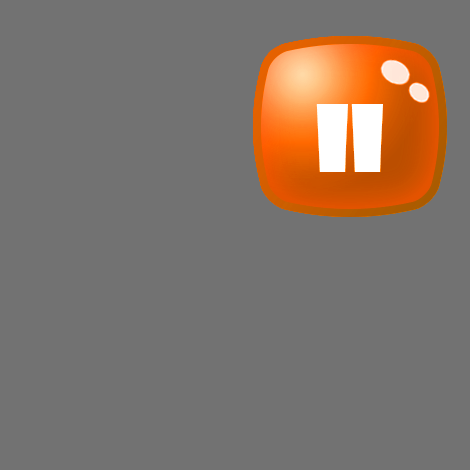
<style>
.page{position:relative;width:470px;height:470px;background:#727272}
.page>*{position:absolute;margin:0}
.t1{font:90.3px "ShowcardGothic-Reg";color:#ffffff}
</style>
<div class="page">
<p class="t1" style="left:316px;top:104px;width:32px;height:68px">I</p>
<p class="t1" style="left:351px;top:104px;width:32px;height:68px">I</p>
</div>
